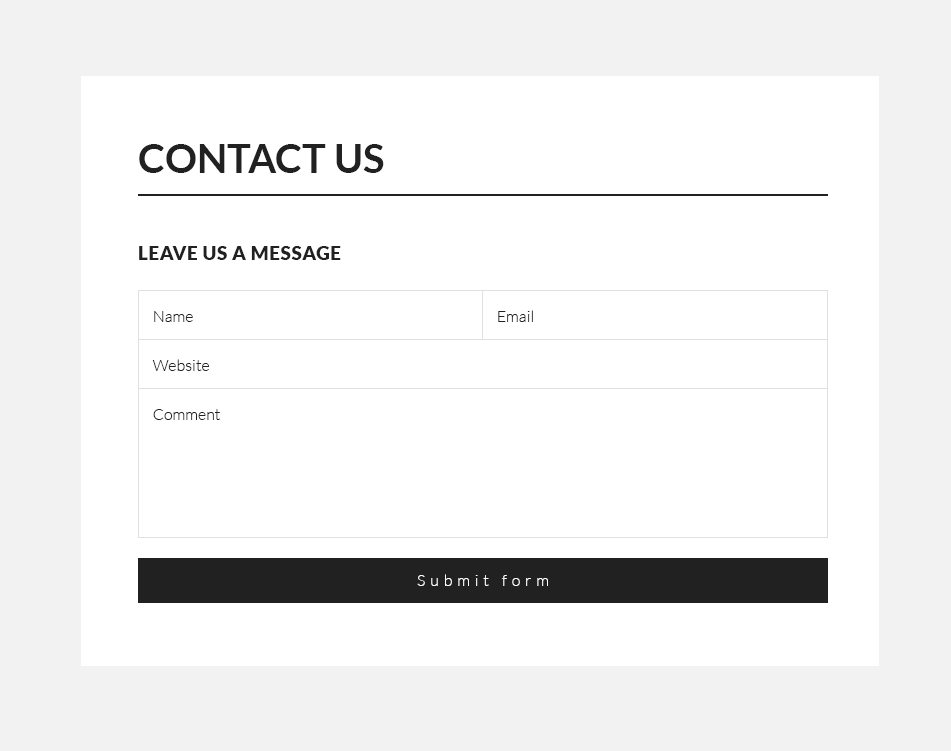
<style>
.page{position:relative;width:951px;height:751px;background:#ffffff}
.page>*{position:absolute;margin:0}
.t1{font:40px "Lato-Bold";color:#212121;text-transform:uppercase}
.t2{font:19px "Lato-Black";letter-spacing:0.03em;color:#212121;text-transform:uppercase}
.t3{font:16px "Lato-Light";color:#212121}
.t4{font:16px "Lato-Light";letter-spacing:0.3em;color:#ffffff}
</style>
<div class="page">
<p class="t1" style="left:139px;top:144px;width:245px;height:29px">Contact us</p>
<p class="t2" style="left:139px;top:246px;width:202px;height:14px">Leave us a message</p>
<p class="t3" style="left:154px;top:311px;width:39px;height:11px">Name</p>
<p class="t3" style="left:498px;top:310px;width:35px;height:12px">Email</p>
<p class="t3" style="left:152px;top:359px;width:57px;height:12px">Website</p>
<p class="t3" style="left:153px;top:409px;width:68px;height:11px">Comment</p>
<p class="t4" style="left:417px;top:574px;width:131px;height:12px">Submit form</p>
</div>
